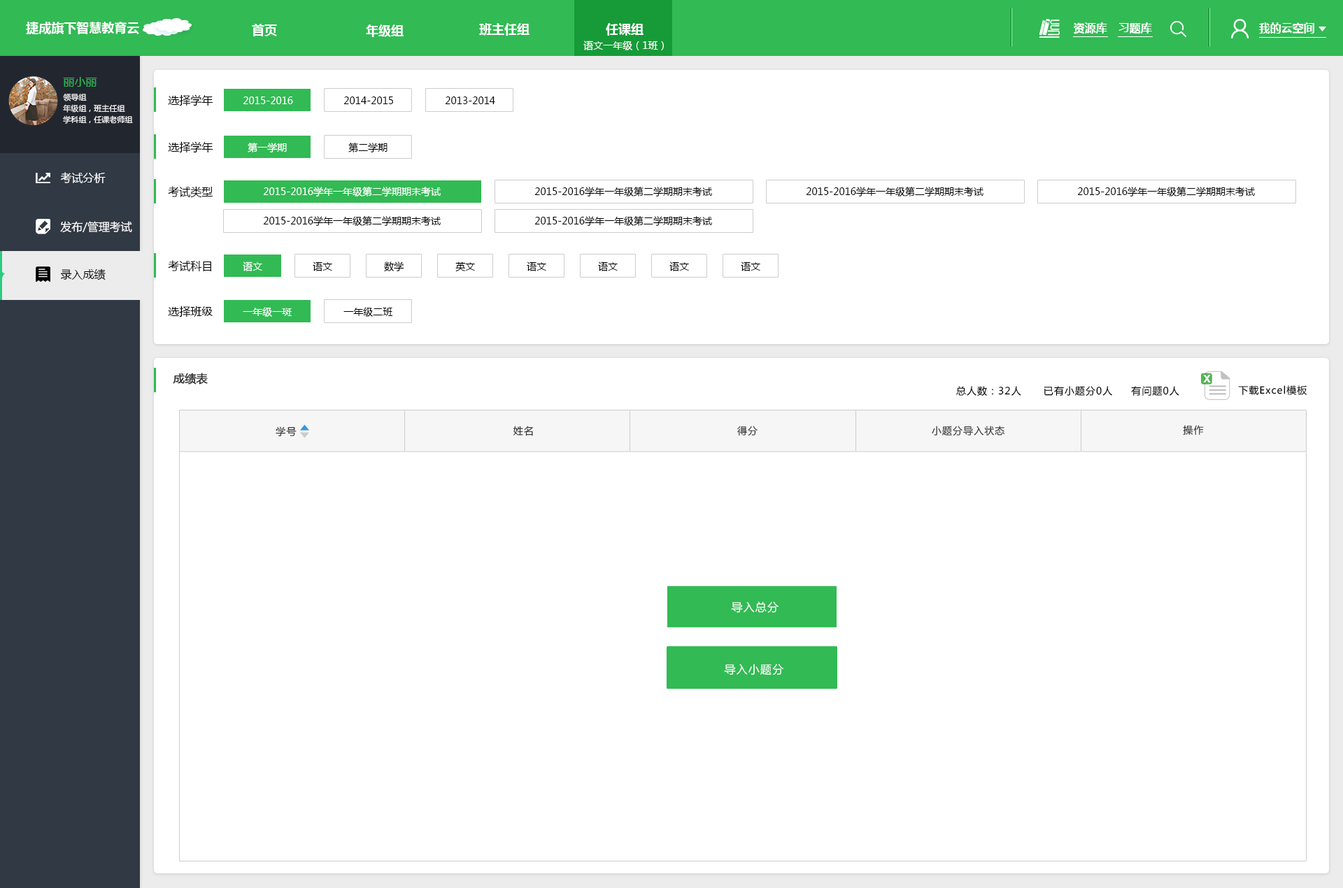
<style>
.page{position:relative;width:1343px;height:888px;background:#ffffff}
.page>*{position:absolute;margin:0}
.t1{font:12.6px "MicrosoftYaHei-Bold";color:#ffffff}
.t2{font:11.2px "MicrosoftYaHei-Bold";color:#ffffff}
.t3{font:9.8px "MicrosoftYaHei";color:#ffffff}
.t4{font:11.2px "MicrosoftYaHei";color:#32ba54}
.t5{font:7.7px/11.2px "MicrosoftYaHei";color:#ffffff}
.t6{font:11.2px "MicrosoftYaHei";color:#000000}
.t7{font:9.8px "MicrosoftYaHei";color:#000000}
.t8{font:11.2px "MicrosoftYaHei";color:#ffffff}
.t9{font:11.2px "MicrosoftYaHei";color:#333333;font-weight:bold}
.t10{font:9.8px "MicrosoftYaHei";letter-spacing:0.075em;color:#000000}
.t11{font:9.8px "MicrosoftYaHei";letter-spacing:0.075em;color:#333333}
.t12{font:11.2px "MicrosoftYaHei";letter-spacing:0.075em;color:#ffffff}
</style>
<div class="page">
<p class="t1" style="left:26px;top:22px;width:113px;height:12px">捷成旗下智慧教育云</p>
<p class="t1" style="left:252px;top:24px;width:25px;height:12px">首页</p>
<p class="t1" style="left:366px;top:24px;width:37px;height:13px">年级组</p>
<p class="t1" style="left:479px;top:23px;width:50px;height:13px">班主任组</p>
<p class="t1" style="left:606px;top:23px;width:37px;height:13px">任课组</p>
<p class="t2" style="left:1073px;top:22px;width:34px;height:12px">资源库</p>
<p class="t2" style="left:1118px;top:22px;width:34px;height:12px">习题库</p>
<p class="t2" style="left:1259px;top:22px;width:55px;height:12px">我的云空间</p>
<p class="t3" style="left:583px;top:41px;width:81px;height:9px">语文一年级（1班）</p>
<p class="t4" style="left:63px;top:77px;width:34px;height:10px">丽小丽</p>
<p class="t4" style="left:63px;top:77px;width:34px;height:10px">丽小丽</p>
<p class="t5" style="left:63px;top:94px;width:70px;height:30px">领导组<br>年级组，班主任组<br>学科组，任课老师组</p>
<p class="t6" style="left:168px;top:94px;width:45px;height:12px">选择学年</p>
<p class="t3" style="left:243px;top:97px;width:50px;height:7px">2015-2016</p>
<p class="t7" style="left:343px;top:97px;width:50px;height:7px">2014-2015</p>
<p class="t7" style="left:445px;top:97px;width:50px;height:7px">2013-2014</p>
<p class="t6" style="left:168px;top:141px;width:45px;height:12px">选择学年</p>
<p class="t3" style="left:248px;top:143px;width:39px;height:9px">第一学期</p>
<p class="t7" style="left:348px;top:143px;width:39px;height:9px">第二学期</p>
<p class="t8" style="left:60px;top:172px;width:46px;height:11px">考试分析</p>
<p class="t8" style="left:60px;top:172px;width:46px;height:11px">考试分析</p>
<p class="t6" style="left:168px;top:186px;width:45px;height:12px">考试类型</p>
<p class="t3" style="left:263px;top:187px;width:178px;height:10px">2015-2016学年一年级第二学期期末考试</p>
<p class="t7" style="left:534px;top:187px;width:178px;height:10px">2015-2016学年一年级第二学期期末考试</p>
<p class="t7" style="left:806px;top:187px;width:177px;height:10px">2015-2016学年一年级第二学期期末考试</p>
<p class="t7" style="left:1077px;top:187px;width:178px;height:10px">2015-2016学年一年级第二学期期末考试</p>
<p class="t8" style="left:60px;top:221px;width:72px;height:12px">发布/管理考试</p>
<p class="t7" style="left:263px;top:216px;width:178px;height:10px">2015-2016学年一年级第二学期期末考试</p>
<p class="t7" style="left:534px;top:216px;width:178px;height:10px">2015-2016学年一年级第二学期期末考试</p>
<p class="t6" style="left:60px;top:269px;width:46px;height:11px">录入成绩</p>
<p class="t6" style="left:60px;top:269px;width:46px;height:11px">录入成绩</p>
<p class="t6" style="left:60px;top:269px;width:46px;height:11px">录入成绩</p>
<p class="t6" style="left:168px;top:260px;width:43px;height:11px">考试科目</p>
<p class="t3" style="left:243px;top:262px;width:19px;height:9px">语文</p>
<p class="t7" style="left:313px;top:262px;width:19px;height:9px">语文</p>
<p class="t7" style="left:384px;top:262px;width:20px;height:9px">数学</p>
<p class="t7" style="left:455px;top:262px;width:20px;height:10px">英文</p>
<p class="t7" style="left:527px;top:262px;width:19px;height:9px">语文</p>
<p class="t7" style="left:598px;top:262px;width:19px;height:9px">语文</p>
<p class="t7" style="left:669px;top:262px;width:20px;height:9px">语文</p>
<p class="t7" style="left:741px;top:262px;width:19px;height:9px">语文</p>
<p class="t6" style="left:168px;top:306px;width:45px;height:11px">选择班级</p>
<p class="t3" style="left:243px;top:307px;width:49px;height:10px">一年级一斑</p>
<p class="t7" style="left:343px;top:307px;width:50px;height:10px">一年级二班</p>
<p class="t9" style="left:173px;top:373px;width:35px;height:12px">成绩表</p>
<p class="t10" style="left:956px;top:386px;width:223px;height:11px">总人数：32人      已有小题分0人     有问题0人</p>
<p class="t10" style="left:1238px;top:385px;width:69px;height:10px">下载Excel模板</p>
<p class="t11" style="left:513px;top:426px;width:20px;height:10px">姓名</p>
<p class="t11" style="left:737px;top:426px;width:20px;height:10px">得分</p>
<p class="t11" style="left:931px;top:426px;width:74px;height:10px">小题分导入状态</p>
<p class="t11" style="left:1183px;top:425px;width:20px;height:10px">操作</p>
<p class="t11" style="left:276px;top:427px;width:21px;height:9px">学号</p>
<p class="t12" style="left:731px;top:601px;width:47px;height:12px">导入总分</p>
<p class="t12" style="left:724px;top:664px;width:59px;height:12px">导入小题分</p>
</div>
